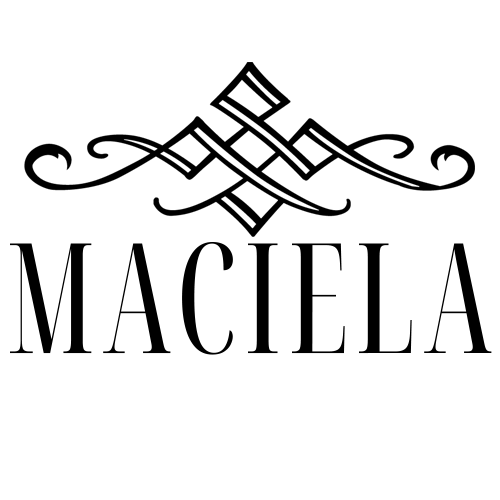
<style>
.page{position:relative;width:500px;height:500px;background:#ffffff}
.page>*{position:absolute;margin:0}
.t1{font:153.3px "NotoSerifDisplay-ExtraCondensedMedium";letter-spacing:0.075em;color:#000000;scale:0.76 1}
</style>
<div class="page">
<p class="t1" style="left:10px;top:242px;width:482px;height:113px">MACIELA</p>
</div>
